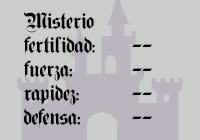
<style>
.page{position:relative;width:200px;height:140px;background:#cccccd}
.page>*{position:absolute;margin:0}
.t1{font:20px "PlainGermanica";color:#000000}
</style>
<div class="page">
<p class="t1" style="left:24px;top:12px;width:128px;height:116px">Misterio<br>fertilidad:  --<br>fuerza:  --<br>rapidez:  --<br>defensa:  --</p>
</div>
